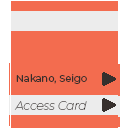
<style>
.page{position:relative;width:128px;height:128px;background:#f36c4f}
.page>*{position:absolute;margin:0}
.t1{font:10px "Montserrat-Regular";color:#362f2d}
.t2{font:12px "Montserrat-ThinItalic";color:#362f2d}
</style>
<div class="page">
<p class="t1" style="left:16px;top:74px;width:71px;height:10px">Nakano, Seigo</p>
<p class="t2" style="left:14px;top:101px;width:73px;height:9px">Access Card</p>
</div>
